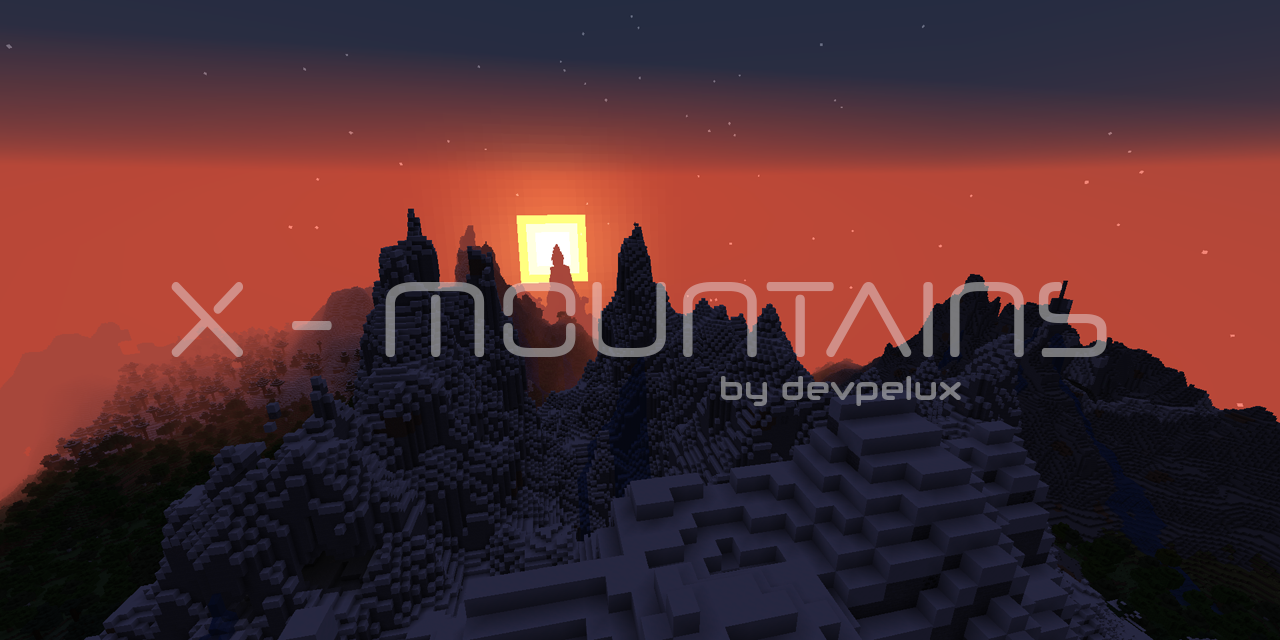
<style>
.page{position:relative;width:1280px;height:640px}
.page>*{position:absolute;margin:0}
.t1{font:168px "NeuropolNova";scale:0.83 1}
.t2{font:33.6px "NeuropolXRg-Bold";color:#7b7b81;scale:0.83 1}
</style>
<div class="page">
<p class="t1" style="left:171px;top:282px;width:936px;height:75px">X - MOUNTAINS</p>
<p class="t2" style="left:721px;top:376px;width:240px;height:30px">by devpelux</p>
</div>
